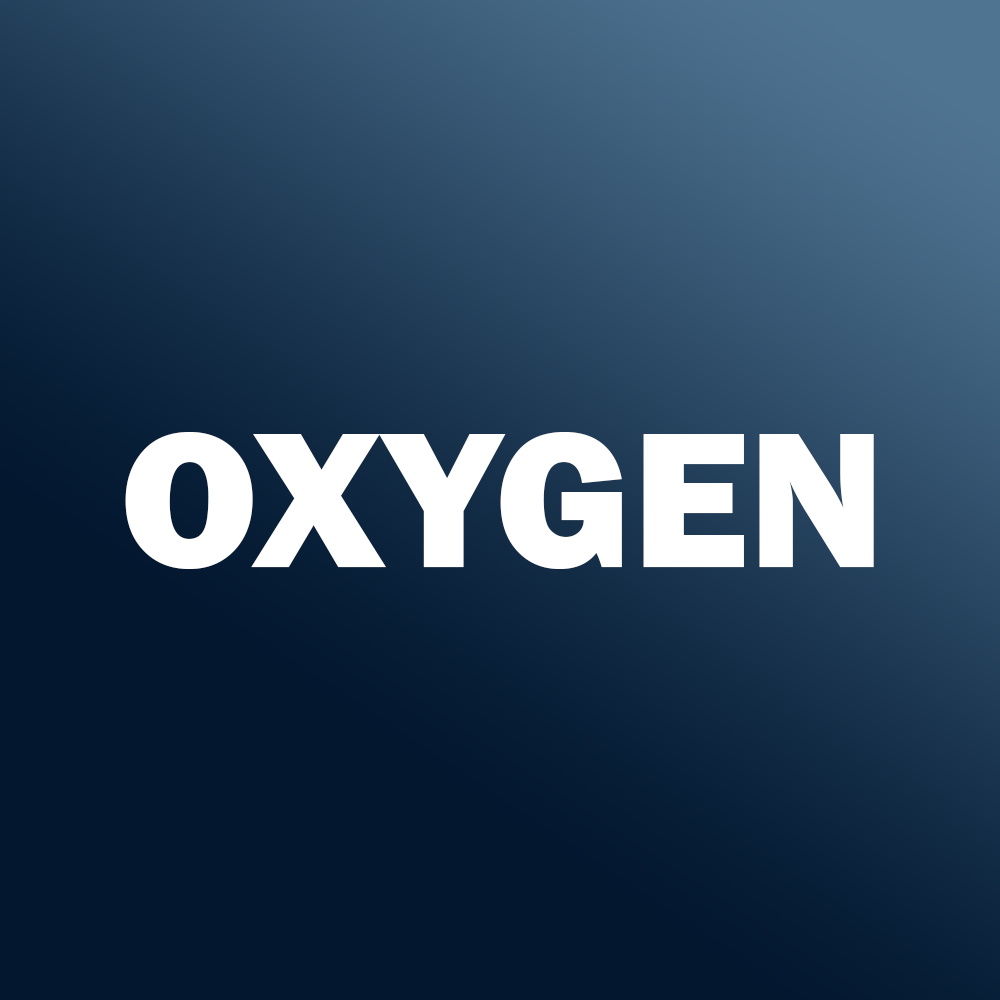
<style>
.page{position:relative;width:1000px;height:1000px;background:#03172f}
.page>*{position:absolute;margin:0}
.t1{font:200px "FranklinGothic-Heavy";color:#ffffff}
</style>
<div class="page">
<p class="t1" style="left:125px;top:432px;width:749px;height:137px">OXYGEN</p>
</div>
